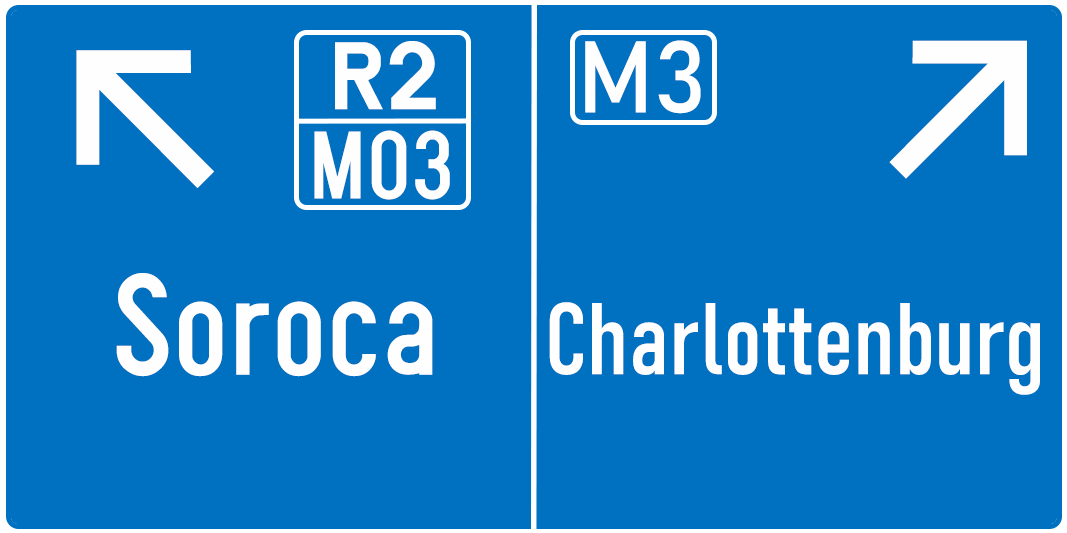
<style>
.page{position:relative;width:1067px;height:533px;background:#0070c0}
.page>*{position:absolute;margin:0}
.t1{font:100px "SnvD-Regu";color:#fefefe}
.t2{font:100px "Bahnschrift";color:#fefefe}
.t3{font:250px "InterV-Medium";color:#fefefe}
.t4{font:100px "SnvBeckerRegCond";color:#fefefe}
.t5{font:150px "SnvBeckerRegCond";color:#fefefe}
.t6{font:100px "Bahnschrift-Condensed";color:#fefefe}
</style>
<div class="page">
<p class="t1" style="left:335px;top:41px;width:101px;height:69px">R2</p>
<p class="t2" style="left:585px;top:40px;width:116px;height:74px">M3</p>
<p class="t3" style="left:889px;top:40px;width:138px;height:139px">↗</p>
<p class="t3" style="left:76px;top:50px;width:138px;height:138px">↖</p>
<p class="t4" style="left:314px;top:130px;width:136px;height:70px">M03</p>
<p class="t5" style="left:116px;top:273px;width:317px;height:104px">Soroca</p>
<p class="t6" style="left:549px;top:302px;width:491px;height:93px">Charlottenburg</p>
</div>
